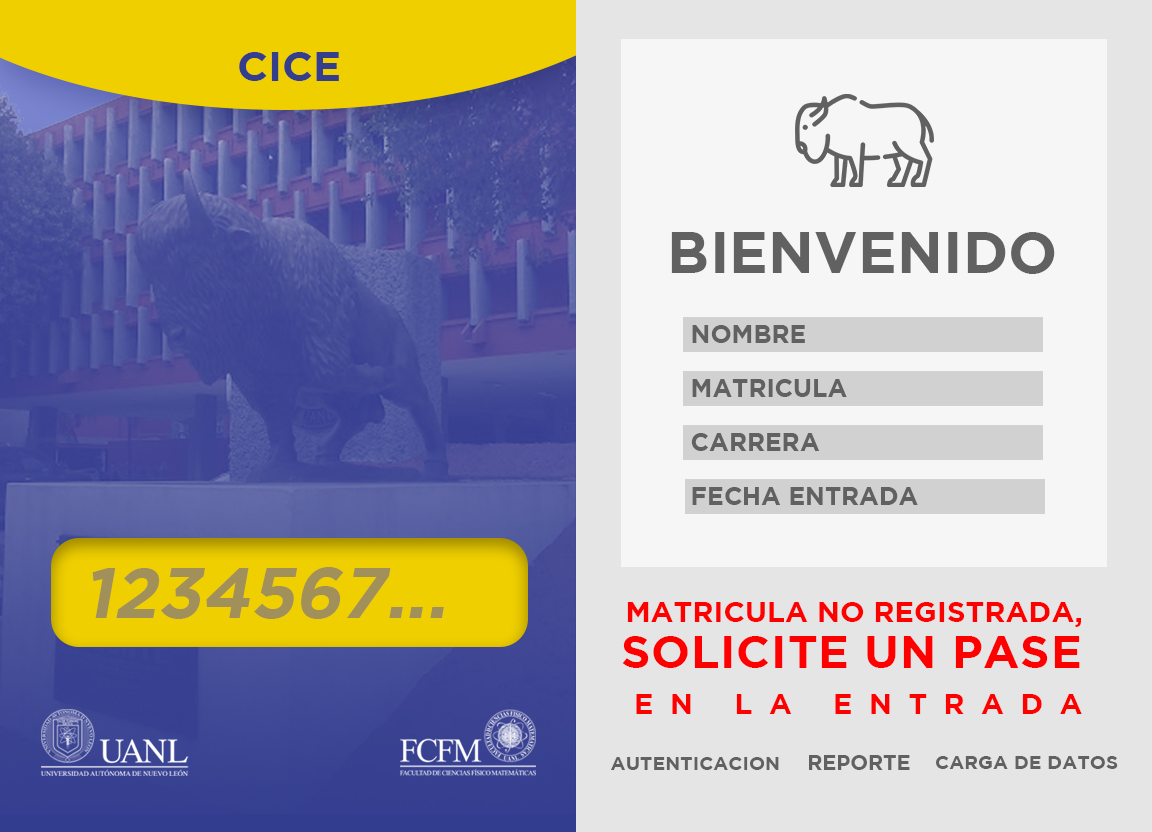
<style>
.page{position:relative;width:1152px;height:832px;background:#e5e5e5}
.page>*{position:absolute;margin:0}
.t1{font:41.7px "GothamBold";color:#353e8c}
.t2{font:58.3px "GothamBold";color:#616161}
.t3{font:25px/54.2px "GothamBold";color:#616161;text-transform:uppercase}
.t4{font:70.8px "GothamBold";color:#a19059;text-transform:uppercase;font-style:italic}
.t5{font:29.2px/45.8px "GothamBold";color:#ff0000;text-transform:uppercase}
.t6{font:45.8px/45.8px "GothamBold";letter-spacing:0.02em;color:#ff0000;text-transform:uppercase}
.t7{font:29.2px/45.8px "GothamBold";letter-spacing:0.56em;color:#ff0000;text-transform:uppercase}
.t8{font:19.1px "GothamBold";color:#616161;text-transform:uppercase}
.t9{font:20.8px "GothamBold";color:#616161;text-transform:uppercase}
</style>
<div class="page">
<p class="t1" style="left:239px;top:52px;width:100px;height:29px">CICE</p>
<p class="t2" style="left:671px;top:232px;width:384px;height:42px">BIENVENIDO</p>
<p class="t3" style="left:691px;top:325px;width:227px;height:180px">Nombre<br>Matricula<br>Carrera<br>Fecha entrada</p>
<p class="t4" style="left:92px;top:567px;width:352px;height:52px">1234567...</p>
<p class="t5" style="left:622px;top:602px;width:460px;height:112px;text-align:center">Matricula no registrada, <br><span class="t6">solicite un pase <br></span><span class="t7">en la entrada</span></p>
<p class="t8" style="left:611px;top:757px;width:168px;height:13px">Autenticacion</p>
<p class="t9" style="left:809px;top:755px;width:101px;height:15px">Reporte</p>
<p class="t8" style="left:936px;top:756px;width:182px;height:13px">Carga de datos</p>
</div>
